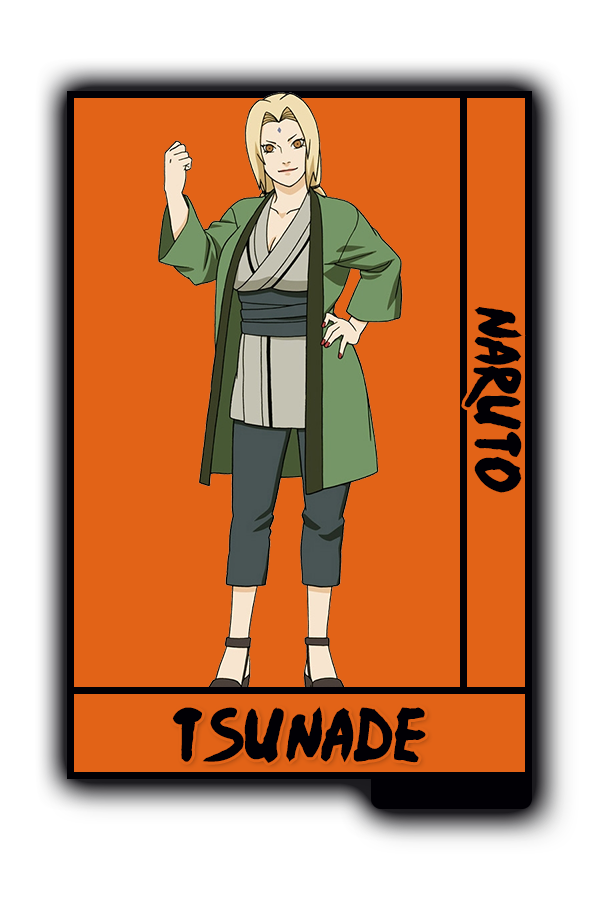
<style>
.page{position:relative;width:600px;height:900px;background:#e26317}
.page>*{position:absolute;margin:0}
.t1{font:52px "Ninja-Naruto";color:#010005}
.t2{font:60.3px "Ninja-Naruto";color:#010005}
</style>
<div class="page">
<p class="t1" style="left:464px;top:307px;width:59px;height:186px;rotate:90deg">Naruto</p>
<p class="t2" style="left:172px;top:706px;width:254px;height:57px">Tsunade</p>
</div>
